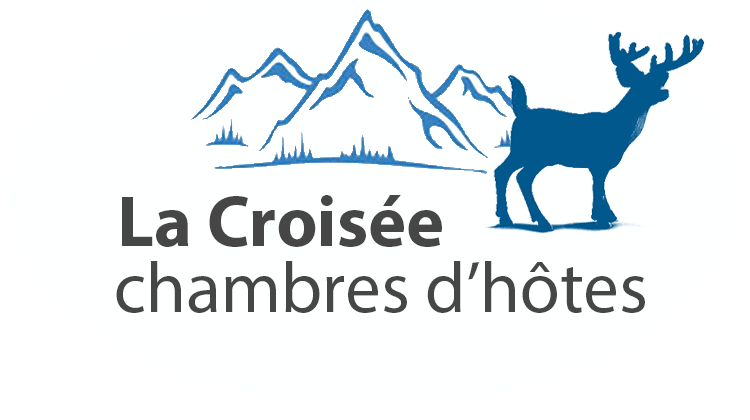
<style>
.page{position:relative;width:750px;height:420px;background:#feffff}
.page>*{position:absolute;margin:0}
.t1{font:72px "MyriadHebrew-Bold";color:#464646}
.t2{font:72px "MyriadHebrew-Regular";color:#464646}
</style>
<div class="page">
<p class="t1" style="left:122px;top:195px;width:320px;height:52px">La Croisée</p>
<p class="t2" style="left:116px;top:261px;width:529px;height:52px">chambres d’hôtes</p>
</div>
